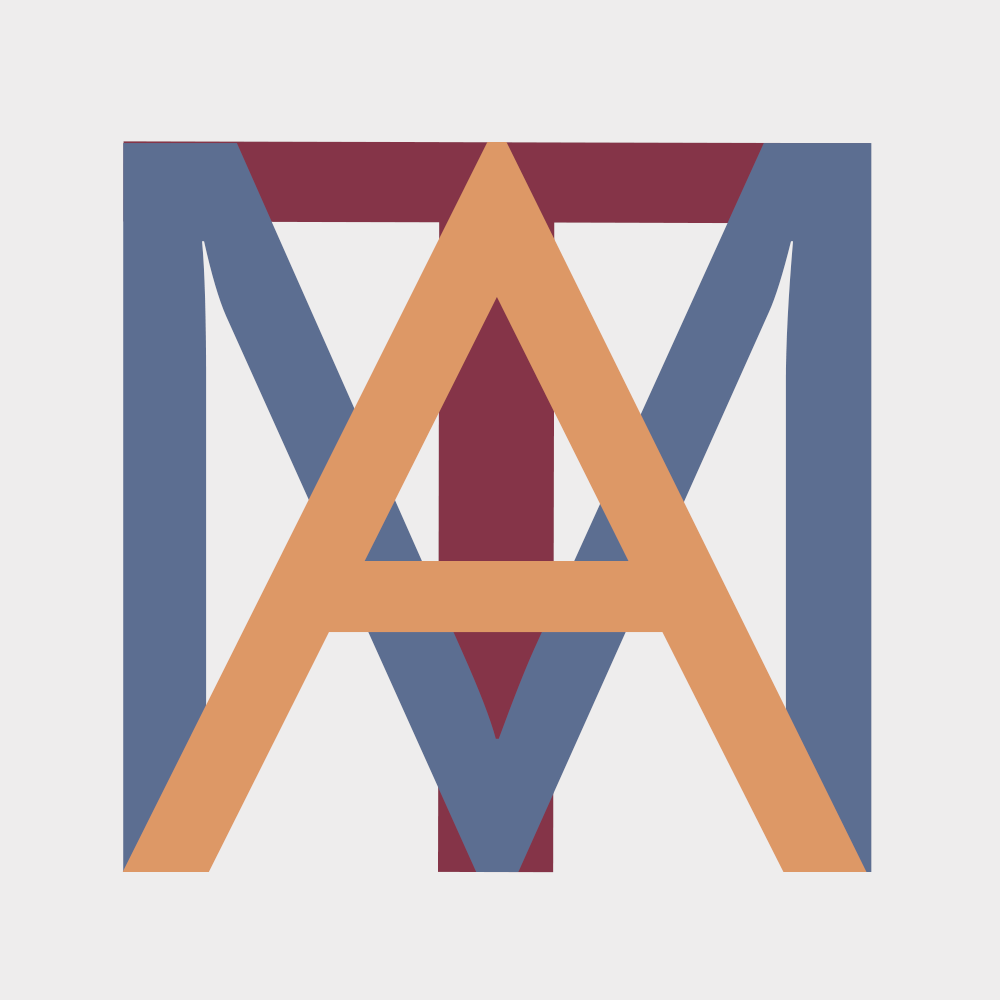
<style>
.page{position:relative;width:1000px;height:1000px;background:#eeeded}
.page>*{position:absolute;margin:0}
.t1{font:1015.5px "CenturyGothic";color:#dd9866;scale:1.06 1}
.t2{font:1116.9px "Corbel";scale:1.3 1}
</style>
<div class="page">
<p class="t1" style="left:122px;top:142px;width:745px;height:730px">A</p>
<p class="t2" style="left:123px;top:141px;width:748px;height:732px">T</p>
</div>
